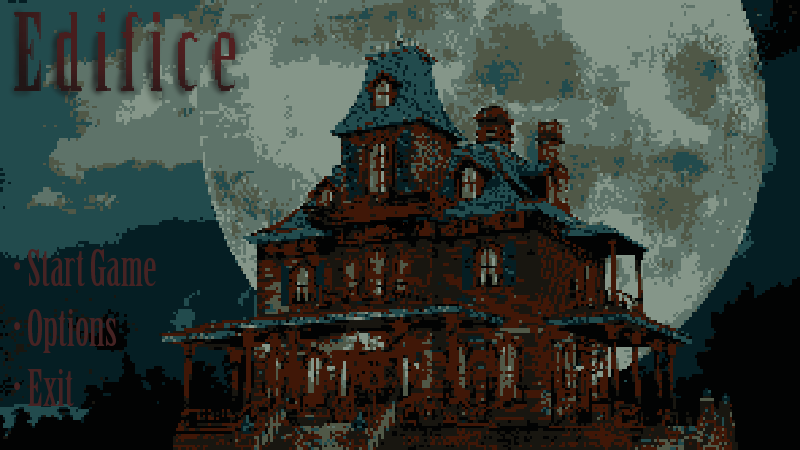
<style>
.page{position:relative;width:800px;height:450px}
.page>*{position:absolute;margin:0}
.t1{font:50px "BirchStd";color:#462323}
</style>
<div class="page">
<p class="t1" style="left:14px;top:249px;width:142px;height:157px">• Start Game<br>• Options<br>• Exit</p>
</div>
